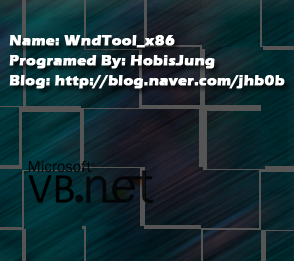
<style>
.page{position:relative;width:294px;height:261px}
.page>*{position:absolute;margin:0}
.t1{font:15px "ErasITC-Bold";color:#fefefe;font-weight:bold}
</style>
<div class="page">
<p class="t1" style="left:9px;top:35px;width:166px;height:13px">Name: WndTool_x86</p>
<p class="t1" style="left:9px;top:55px;width:206px;height:14px">Programed By: HobisJung</p>
<p class="t1" style="left:9px;top:75px;width:276px;height:14px">Blog: http://blog.naver.com/jhb0b</p>
</div>
